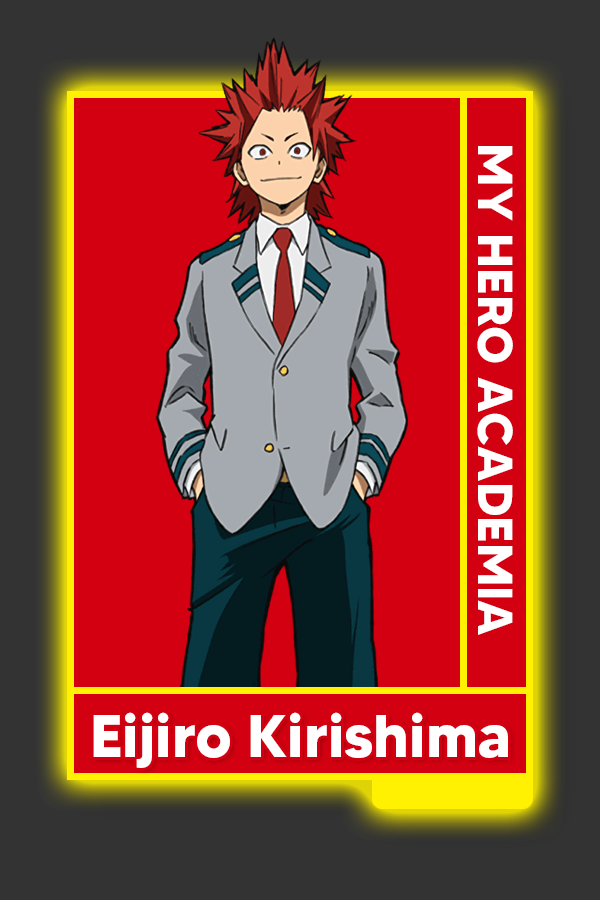
<style>
.page{position:relative;width:600px;height:900px;background:#d20010}
.page>*{position:absolute;margin:0}
.t1{font:48.8px "MADETOMMY-Bold";color:#ffffff}
.t2{font:60.3px "MADETOMMY-Bold";color:#ffffff}
</style>
<div class="page">
<p class="t1" style="left:477px;top:146px;width:36px;height:489px;rotate:90deg">MY HERO ACADEMIA</p>
<p class="t2" style="left:93px;top:712px;width:415px;height:56px">Eijiro Kirishima</p>
</div>
